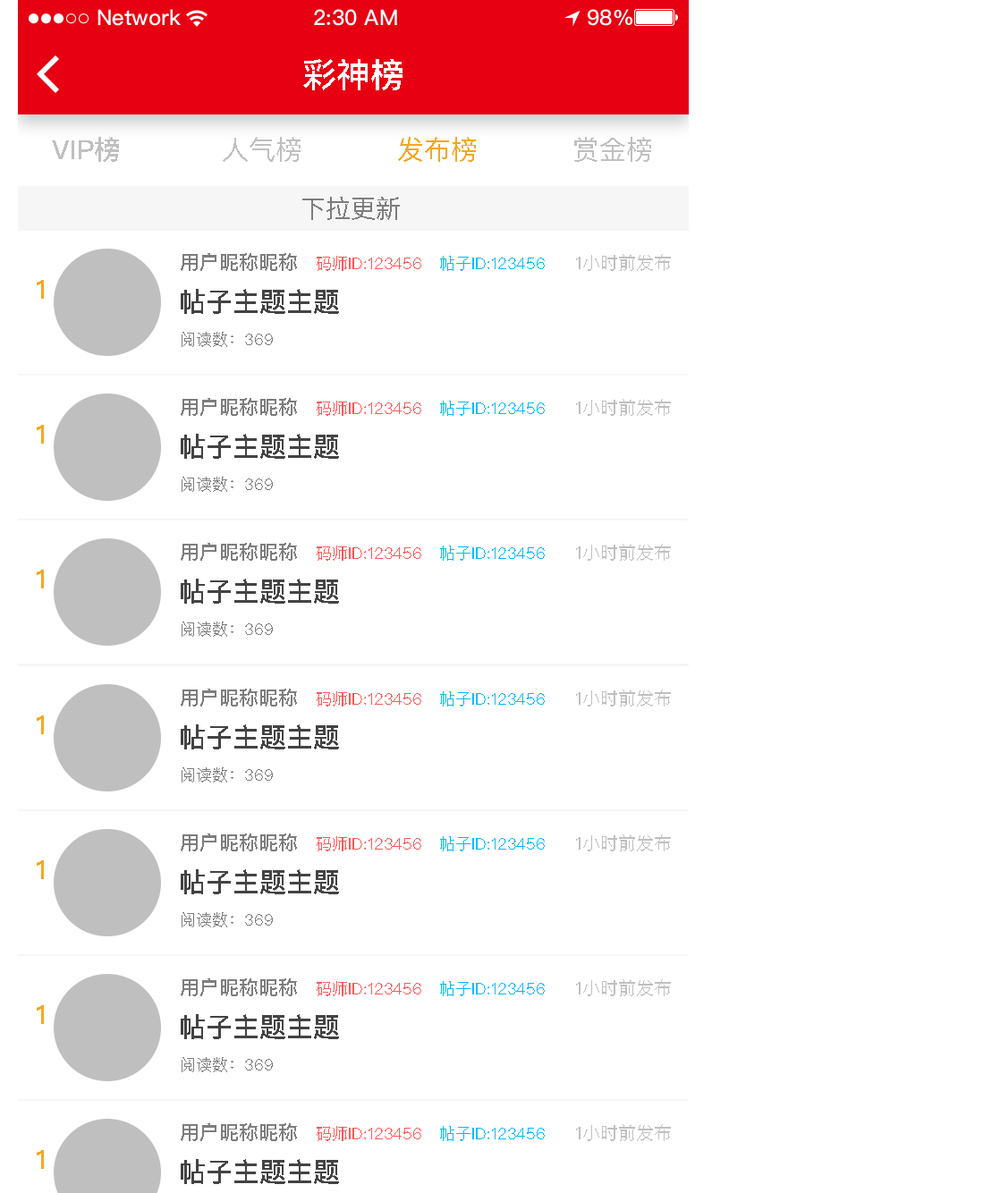
<style>
.page{position:relative;width:1000px;height:1193px;background:#ffffff}
.page>*{position:absolute;margin:0}
.t1{font:34px "PingFangSC-Medium";color:#ffffff;text-transform:uppercase}
.t2{font:26.8px "PingFangSC-Medium";color:#bfbfbf;text-transform:uppercase}
.t3{font:26.8px "PingFangSC-Regular";color:#bfbfbf;text-transform:uppercase}
.t4{font:26.8px "PingFangSC-Regular";color:#f6a623;text-transform:uppercase}
.t5{font:25px "PingFangSC-Regular";color:#7d7d7d;text-transform:uppercase}
.t6{font:19.7px "PingFangSC-Medium";color:#7d7d7d;text-transform:uppercase}
.t7{font:16.1px "PingFangSC-Regular";color:#ff5858;text-transform:uppercase}
.t8{font:16.1px "PingFangSC-Regular";color:#01b9fd;text-transform:uppercase}
.t9{font:17.9px "PingFangSC-Regular";color:#bfbfbf;text-transform:uppercase}
.t10{font:26.8px "PingFangSC-Medium";color:#f6a623;text-transform:uppercase}
.t11{font:26.8px "PingFangSC-Medium";color:#434343;text-transform:uppercase}
.t12{font:16.1px "PingFangSC-Regular";color:#7d7d7d;text-transform:uppercase}
</style>
<div class="page">
<p class="t1" style="left:303px;top:59px;width:99px;height:31px">彩神榜</p>
<p class="t2" style="left:52px;top:137px;width:67px;height:25px">vip榜</p>
<p class="t3" style="left:223px;top:137px;width:77px;height:25px">人气榜</p>
<p class="t4" style="left:398px;top:137px;width:78px;height:25px">发布榜</p>
<p class="t3" style="left:574px;top:137px;width:77px;height:25px">赏金榜</p>
<p class="t5" style="left:302px;top:197px;width:98px;height:23px">下拉更新</p>
<p class="t6" style="left:181px;top:253px;width:116px;height:18px">用户昵称昵称</p>
<p class="t7" style="left:317px;top:256px;width:104px;height:15px">码师id:123456</p>
<p class="t8" style="left:440px;top:256px;width:105px;height:15px">帖子id:123456</p>
<p class="t9" style="left:576px;top:254px;width:95px;height:17px">1小时前发布</p>
<p class="t10" style="left:37px;top:280px;width:7px;height:19px">1</p>
<p class="t11" style="left:181px;top:289px;width:158px;height:25px">帖子主题主题</p>
<p class="t12" style="left:182px;top:332px;width:91px;height:15px">阅读数：369</p>
<p class="t6" style="left:181px;top:398px;width:116px;height:18px">用户昵称昵称</p>
<p class="t7" style="left:317px;top:401px;width:104px;height:15px">码师id:123456</p>
<p class="t8" style="left:440px;top:401px;width:105px;height:15px">帖子id:123456</p>
<p class="t9" style="left:576px;top:399px;width:95px;height:17px">1小时前发布</p>
<p class="t10" style="left:37px;top:425px;width:7px;height:19px">1</p>
<p class="t11" style="left:181px;top:434px;width:158px;height:25px">帖子主题主题</p>
<p class="t12" style="left:182px;top:477px;width:91px;height:15px">阅读数：369</p>
<p class="t6" style="left:181px;top:543px;width:116px;height:18px">用户昵称昵称</p>
<p class="t7" style="left:317px;top:545px;width:104px;height:16px">码师id:123456</p>
<p class="t8" style="left:440px;top:545px;width:105px;height:16px">帖子id:123456</p>
<p class="t9" style="left:576px;top:544px;width:95px;height:17px">1小时前发布</p>
<p class="t10" style="left:37px;top:570px;width:7px;height:18px">1</p>
<p class="t11" style="left:181px;top:579px;width:158px;height:25px">帖子主题主题</p>
<p class="t12" style="left:182px;top:621px;width:91px;height:16px">阅读数：369</p>
<p class="t6" style="left:181px;top:689px;width:116px;height:17px">用户昵称昵称</p>
<p class="t9" style="left:576px;top:689px;width:95px;height:17px">1小时前发布</p>
<p class="t7" style="left:317px;top:691px;width:104px;height:15px">码师id:123456</p>
<p class="t8" style="left:440px;top:691px;width:105px;height:15px">帖子id:123456</p>
<p class="t10" style="left:37px;top:715px;width:7px;height:19px">1</p>
<p class="t11" style="left:181px;top:724px;width:158px;height:25px">帖子主题主题</p>
<p class="t12" style="left:182px;top:767px;width:91px;height:15px">阅读数：369</p>
<p class="t6" style="left:181px;top:833px;width:116px;height:18px">用户昵称昵称</p>
<p class="t7" style="left:317px;top:836px;width:104px;height:15px">码师id:123456</p>
<p class="t8" style="left:440px;top:836px;width:105px;height:15px">帖子id:123456</p>
<p class="t9" style="left:576px;top:834px;width:95px;height:17px">1小时前发布</p>
<p class="t10" style="left:37px;top:860px;width:7px;height:19px">1</p>
<p class="t11" style="left:181px;top:869px;width:158px;height:25px">帖子主题主题</p>
<p class="t12" style="left:182px;top:912px;width:91px;height:15px">阅读数：369</p>
<p class="t6" style="left:181px;top:978px;width:116px;height:18px">用户昵称昵称</p>
<p class="t7" style="left:317px;top:981px;width:104px;height:15px">码师id:123456</p>
<p class="t8" style="left:440px;top:981px;width:105px;height:15px">帖子id:123456</p>
<p class="t9" style="left:576px;top:979px;width:95px;height:17px">1小时前发布</p>
<p class="t10" style="left:37px;top:1005px;width:7px;height:19px">1</p>
<p class="t11" style="left:181px;top:1014px;width:158px;height:25px">帖子主题主题</p>
<p class="t12" style="left:182px;top:1057px;width:91px;height:15px">阅读数：369</p>
<p class="t6" style="left:181px;top:1123px;width:116px;height:18px">用户昵称昵称</p>
<p class="t7" style="left:317px;top:1126px;width:104px;height:15px">码师id:123456</p>
<p class="t8" style="left:440px;top:1126px;width:105px;height:15px">帖子id:123456</p>
<p class="t9" style="left:576px;top:1124px;width:95px;height:17px">1小时前发布</p>
<p class="t10" style="left:37px;top:1150px;width:7px;height:19px">1</p>
<p class="t11" style="left:181px;top:1159px;width:158px;height:25px">帖子主题主题</p>
</div>
